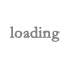
<style>
.page{position:relative;width:70px;height:68px;background:#ffffff}
.page>*{position:absolute;margin:0}
.t1{font:16px "STSong";color:#858080;font-weight:bold}
</style>
<div class="page">
<p class="t1" style="left:10px;top:26px;width:50px;height:16px">loading</p>
</div>
